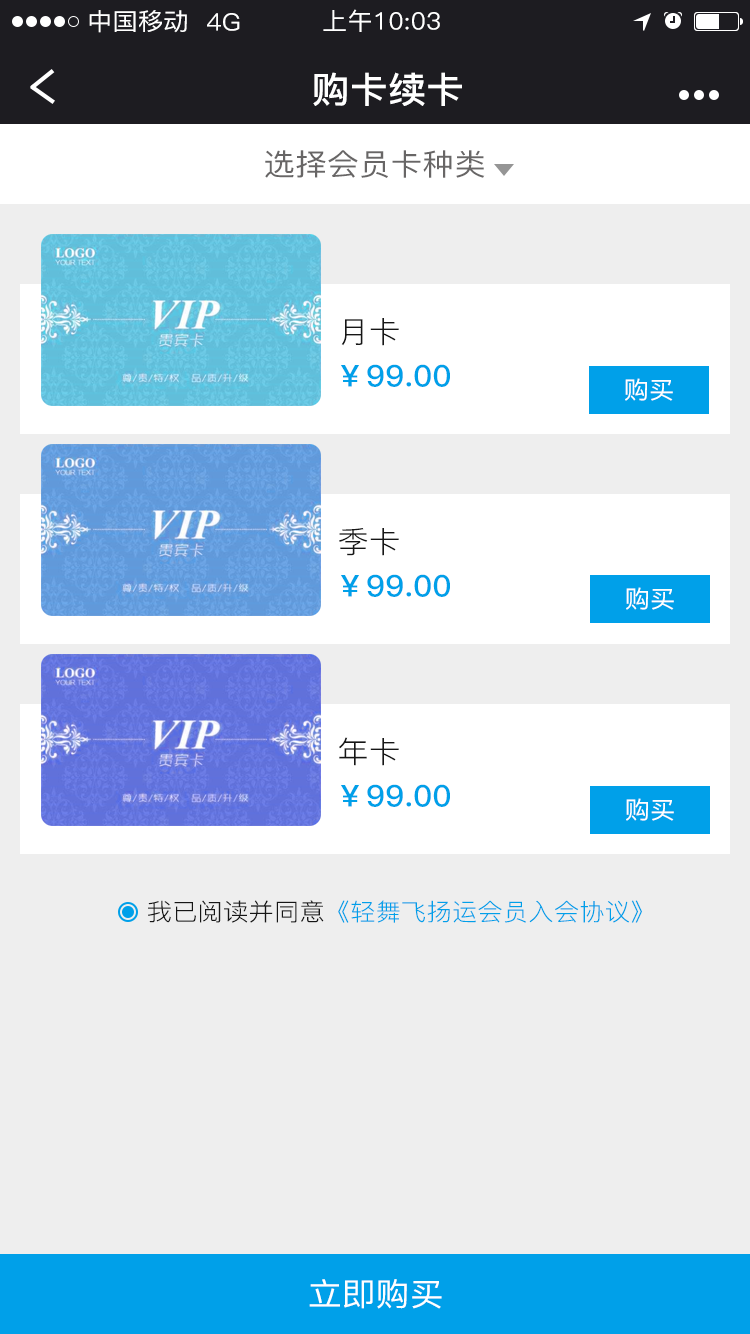
<style>
.page{position:relative;width:750px;height:1334px;background:#eeeeee}
.page>*{position:absolute;margin:0}
.t1{font:24px "PingFang-SC-Medium";letter-spacing:0.01em;color:#ffffff;scale:1.05 1}
.t2{font:36px "PingFang-SC-Bold";letter-spacing:0.01em;color:#ffffff;scale:1.05 1}
.t3{font:30px "PingFang-SC-Medium";letter-spacing:0.01em;color:#686666;scale:1.05 1}
.t4{font:30px "PingFang-SC-Regular";letter-spacing:0.01em;color:#161616;scale:1.05 1}
.t5{font:30px "PingFang-SC-Bold";letter-spacing:0.01em;color:#00a0e9;scale:1.05 1}
.t6{font:24px "PingFang-SC-Regular";letter-spacing:0.01em;color:#00a0e9;scale:1.05 1}
.t7{font:24px "PingFang-SC-Regular";letter-spacing:0.01em;color:#161616;scale:1.05 1}
.t8{font:32px "PingFang-SC-Medium";letter-spacing:0.01em;color:#ffffff;scale:1.05 1}
</style>
<div class="page">
<p class="t1" style="left:89px;top:10px;width:98px;height:23px">中国移动</p>
<p class="t1" style="left:207px;top:13px;width:33px;height:18px">4G</p>
<p class="t1" style="left:323px;top:9px;width:117px;height:23px">上午10:03</p>
<p class="t2" style="left:313px;top:72px;width:149px;height:34px">购卡续卡</p>
<p class="t3" style="left:265px;top:150px;width:220px;height:28px">选择会员卡种类</p>
<p class="t4" style="left:341px;top:318px;width:58px;height:28px">月卡</p>
<p class="t5" style="left:341px;top:364px;width:109px;height:23px">￥99.00</p>
<p class="t1" style="left:625px;top:378px;width:48px;height:23px">购买</p>
<p class="t4" style="left:339px;top:528px;width:60px;height:28px">季卡</p>
<p class="t5" style="left:341px;top:574px;width:109px;height:23px">￥99.00</p>
<p class="t1" style="left:626px;top:587px;width:48px;height:23px">购买</p>
<p class="t4" style="left:339px;top:737px;width:60px;height:29px">年卡</p>
<p class="t5" style="left:341px;top:784px;width:109px;height:23px">￥99.00</p>
<p class="t1" style="left:626px;top:798px;width:48px;height:23px">购买</p>
<p class="t6" style="left:148px;top:900px;width:494px;height:23px"><span class="t7">我已阅读并同意</span>《轻舞飞扬运会员入会协议》</p>
<p class="t8" style="left:309px;top:1279px;width:133px;height:30px">立即购买</p>
</div>
